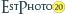
<style>
.page{position:relative;width:65px;height:14px;background:#ffffff}
.page>*{position:absolute;margin:0}
.t1{font:12.3px "TrajanPro-Regular";color:#294550}
.t2{font:8.2px "TrajanPro-Regular";color:#294550}
.t3{font:16.4px "TrajanPro-Regular";color:#294550}
</style>
<div class="page">
<p class="t1" style="left:1px;top:0px;width:8px;height:13px">E</p>
<p class="t2" style="left:9px;top:4px;width:10px;height:6px">st</p>
<p class="t3" style="left:18px;top:1px;width:9px;height:13px">P</p>
<p class="t2" style="left:27px;top:4px;width:26px;height:6px">hoto</p>
</div>
